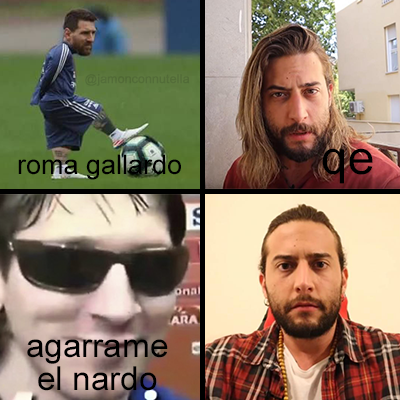
<style>
.page{position:relative;width:400px;height:400px}
.page>*{position:absolute;margin:0}
.t1{font:12px "ArialMT";color:#536c38;font-weight:bold}
.t2{font:47.3px "ArialMT";color:#000000}
.t3{font:27px "ArialMT";color:#000000}
.t4{font:33.3px "ArialMT";color:#000000}
</style>
<div class="page">
<p class="t1" style="left:85px;top:74px;width:105px;height:12px">@jamonconnutella</p>
<p class="t2" style="left:322px;top:148px;width:51px;height:36px">qe</p>
<p class="t3" style="left:18px;top:154px;width:163px;height:26px">roma gallardo</p>
<p class="t4" style="left:27px;top:339px;width:141px;height:52px;text-align:center">agarrame<br>el nardo</p>
</div>
